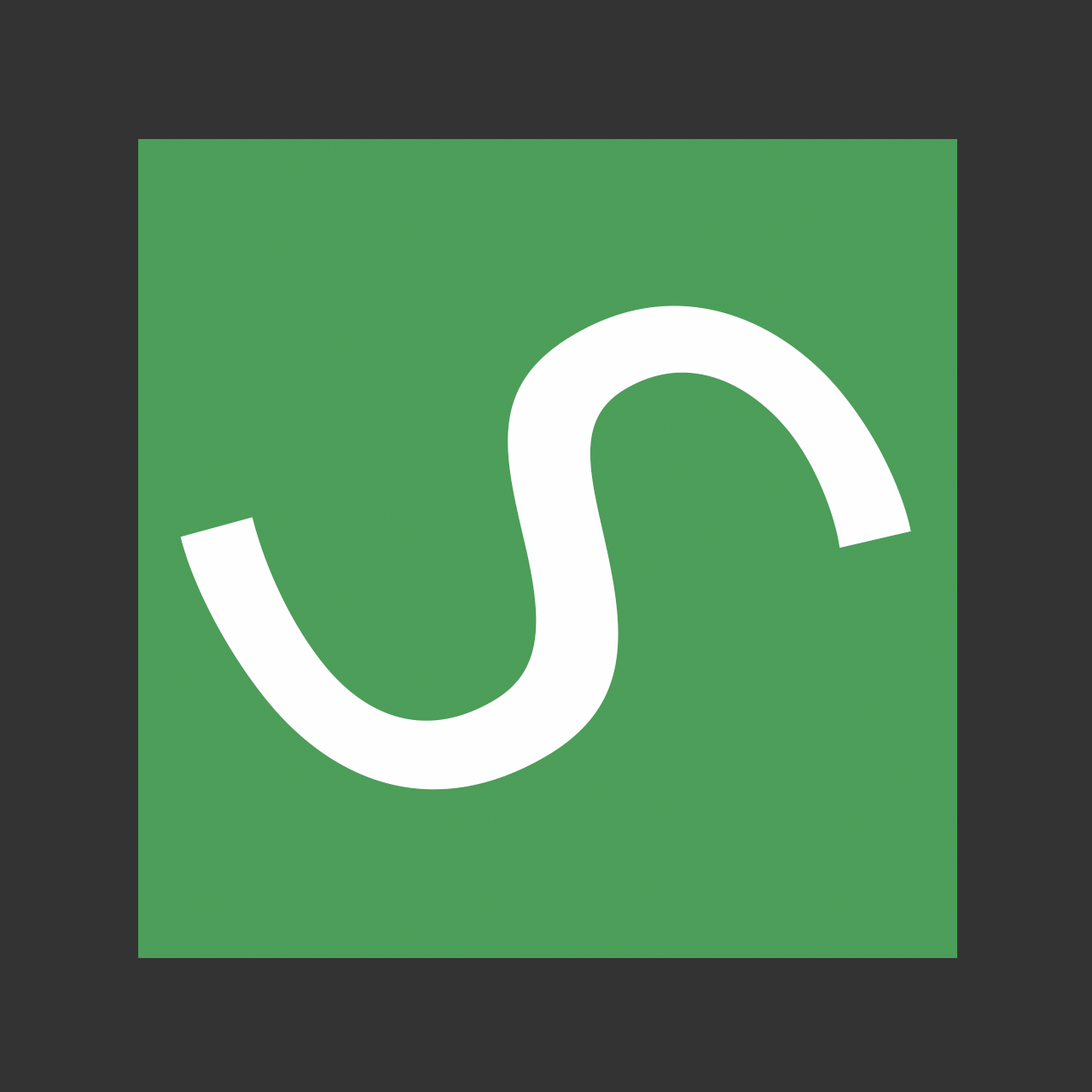
<style>
.page{position:relative;width:1092px;height:1092px;background:#333333}
.page>*{position:absolute;margin:0}
.t1{font:802.1px "AxisStd-Regular";color:#fefefe;font-style:italic}
</style>
<div class="page">
<p class="t1" style="left:180px;top:305px;width:731px;height:485px;rotate:50deg">S</p>
</div>
